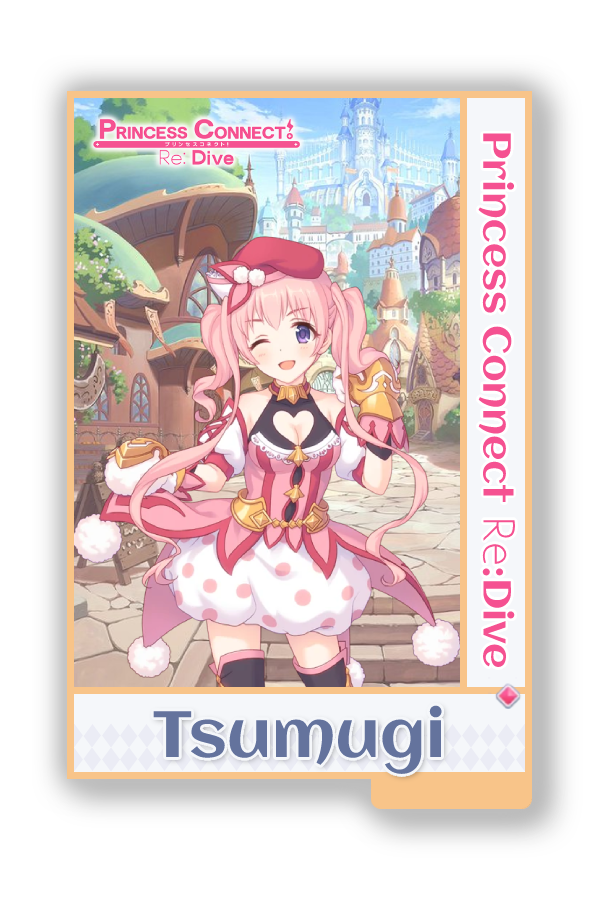
<style>
.page{position:relative;width:600px;height:900px;background:#ffffff}
.page>*{position:absolute;margin:0}
.t1{font:39px "Aclonica-Regular";color:#f55191}
.t2{font:39px "AaarghNormal";color:#f55191}
.t3{font:65px "Aclonica-Regular";color:#64739d}
</style>
<div class="page">
<p class="t1" style="left:478px;top:133px;width:38px;height:534px;rotate:90deg">Princess Connect <span class="t2">Re</span>:Dive</p>
<p class="t3" style="left:153px;top:705px;width:289px;height:69px">Tsumugi</p>
</div>
